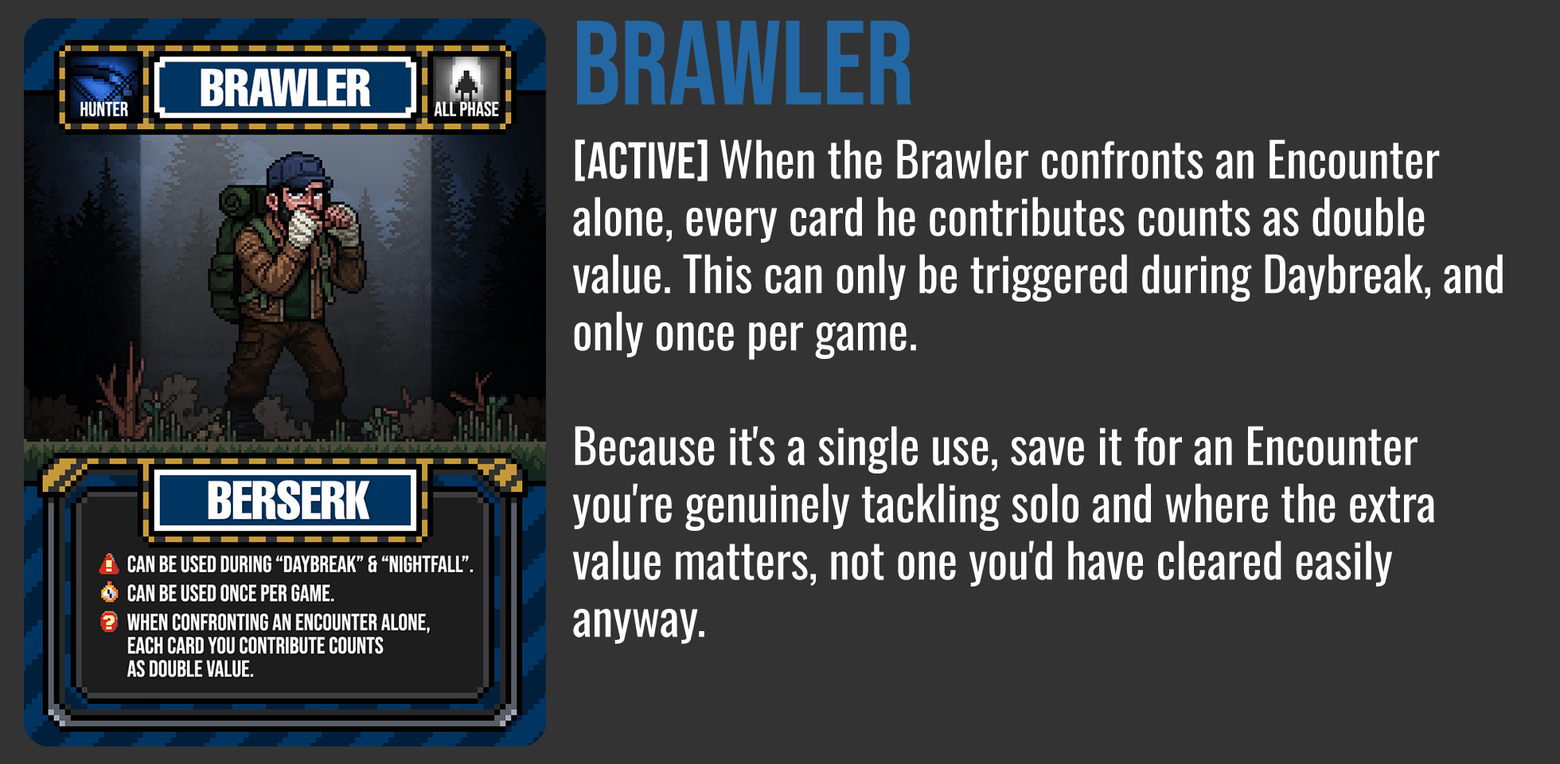
<style>
.page{position:relative;width:1560px;height:764px;background:#333333}
.page>*{position:absolute;margin:0}
.t1{font:119.4px "BebasNeue-Regular";color:#2368a4}
.t2{font:47.8px "Oswald-Regular";color:#ffffff}
.t3{font:51.7px "BebasNeue-Regular";color:#ffffff}
</style>
<div class="page">
<p class="t1" style="left:577px;top:21px;width:335px;height:84px">brawler</p>
<p class="t2" style="left:572px;top:139px;width:931px;height:505px"><span class="t3">[ACTIVE] </span>When the Brawler confronts an Encounter alone, every card he contributes counts as double value. This can only be triggered during Daybreak, and only once per game.<br><br>Because it's a single use, save it for an Encounter you're genuinely tackling solo and where the extra value matters, not one you'd have cleared easily anyway.</p>
</div>
